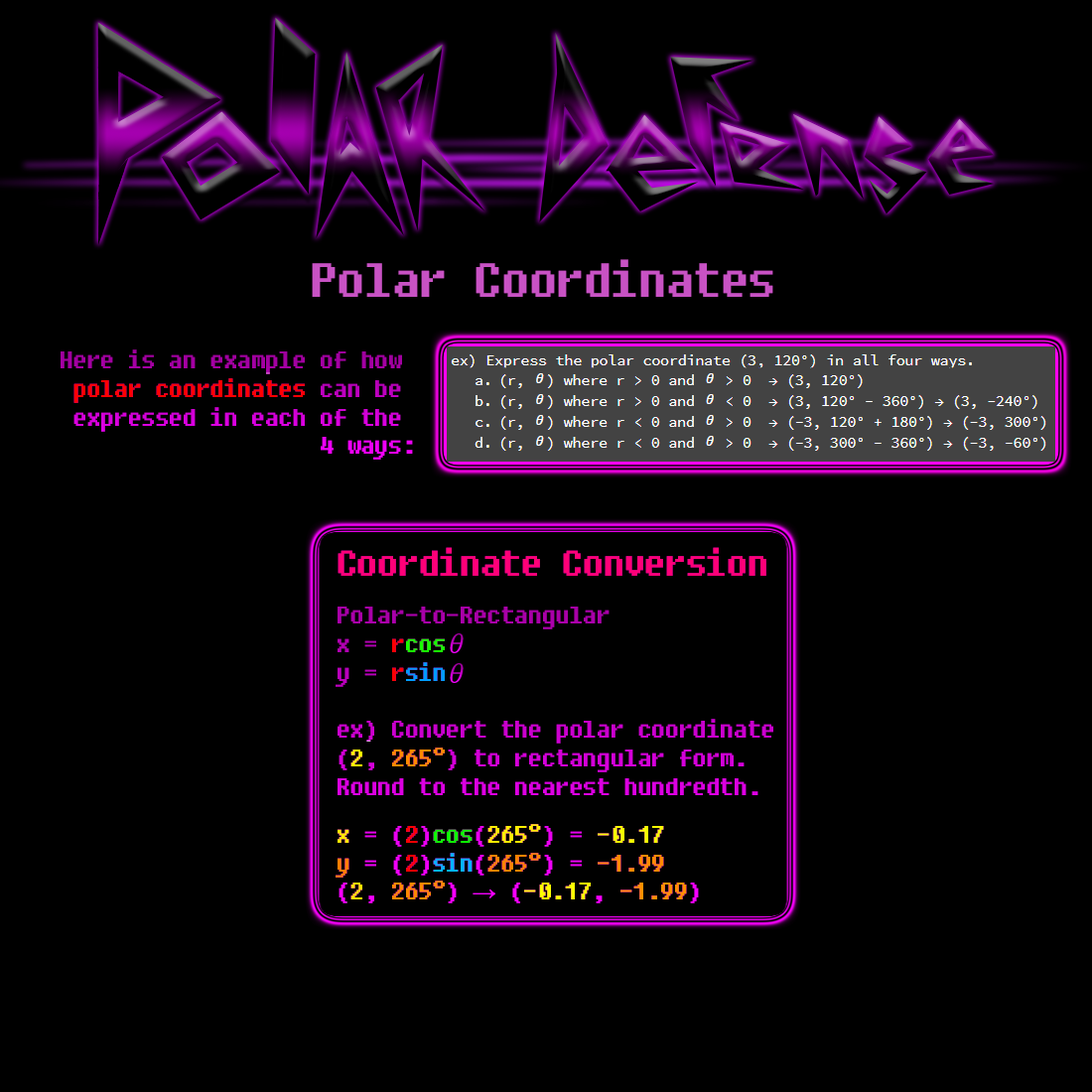
<style>
.page{position:relative;width:1092px;height:1092px;background:#000000}
.page>*{position:absolute;margin:0}
.t1{font:47.7px "Fixedsys";letter-spacing:-0.05em;color:#c852c4}
.t2{font:23.8px "Fixedsys";letter-spacing:-0.05em}
.t3{font:35.7px/47.7px "Fixedsys";letter-spacing:-0.05em}
.t4{font:23.8px/47.7px "Fixedsys";letter-spacing:-0.05em}
.t5{font:23.8px "TimesNewRomanPSMT";letter-spacing:-0.05em}
</style>
<div class="page">
<p class="t1" style="left:312px;top:259px;width:461px;height:38px">Polar Coordinates</p>
<p class="t2" style="left:61px;top:349px;width:352px;height:111px;text-align:right">Here is an example of how <br>polar coordinates can be <br>expressed in each of the <br>4 ways:</p>
<p class="t2" style="left:336px;top:547px;width:437px;height:356px"><span class="t3">Coordinate Conversion<br></span><span class="t4">Polar-to-Rectangular<br></span>x = rcos<br>y = rsin<br><br>ex) Convert the polar coordinate <br>(2, 265°) to rectangular form. <br>Round to the nearest hundredth.<br><span class="t4">x = (2)cos(265°) = -0.17 <br></span>y = (2)sin(265°) = -1.99<br>(2, 265°) <span class="t5">→</span> (-0.17, -1.99)</p>
</div>
